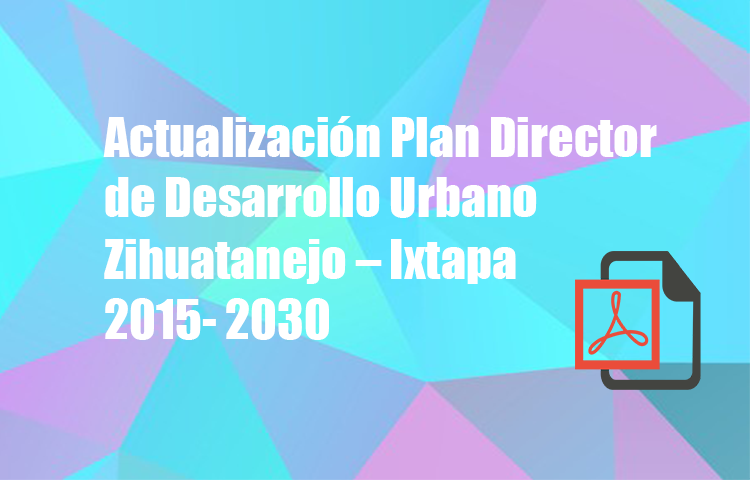
<style>
.page{position:relative;width:750px;height:480px}
.page>*{position:absolute;margin:0}
.t1{font:50px "Impact";color:#ffffff}
</style>
<div class="page">
<p class="t1" style="left:103px;top:116px;width:554px;height:102px">Actualización Plan Director de Desarrollo Urbano</p>
<p class="t1" style="left:104px;top:239px;width:412px;height:101px">Zihuatanejo – Ixtapa <br>2015- 2030</p>
</div>
